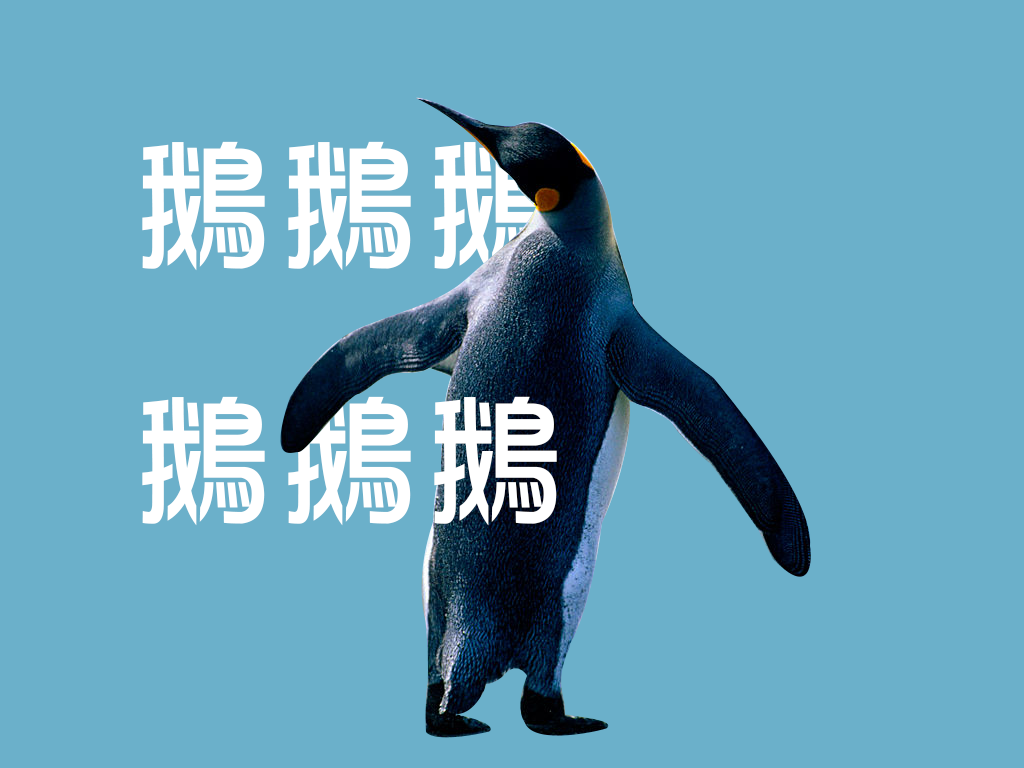
<style>
.page{position:relative;width:1024px;height:768px;background:#6bb0ca}
.page>*{position:absolute;margin:0}
.t1{font:145.8px "DFHuaZong-W5-WINP-BF";color:#ffffff}
</style>
<div class="page">
<p class="t1" style="left:142px;top:141px;width:415px;height:385px">鵝鵝鵝<br>鵝鵝鵝</p>
</div>
